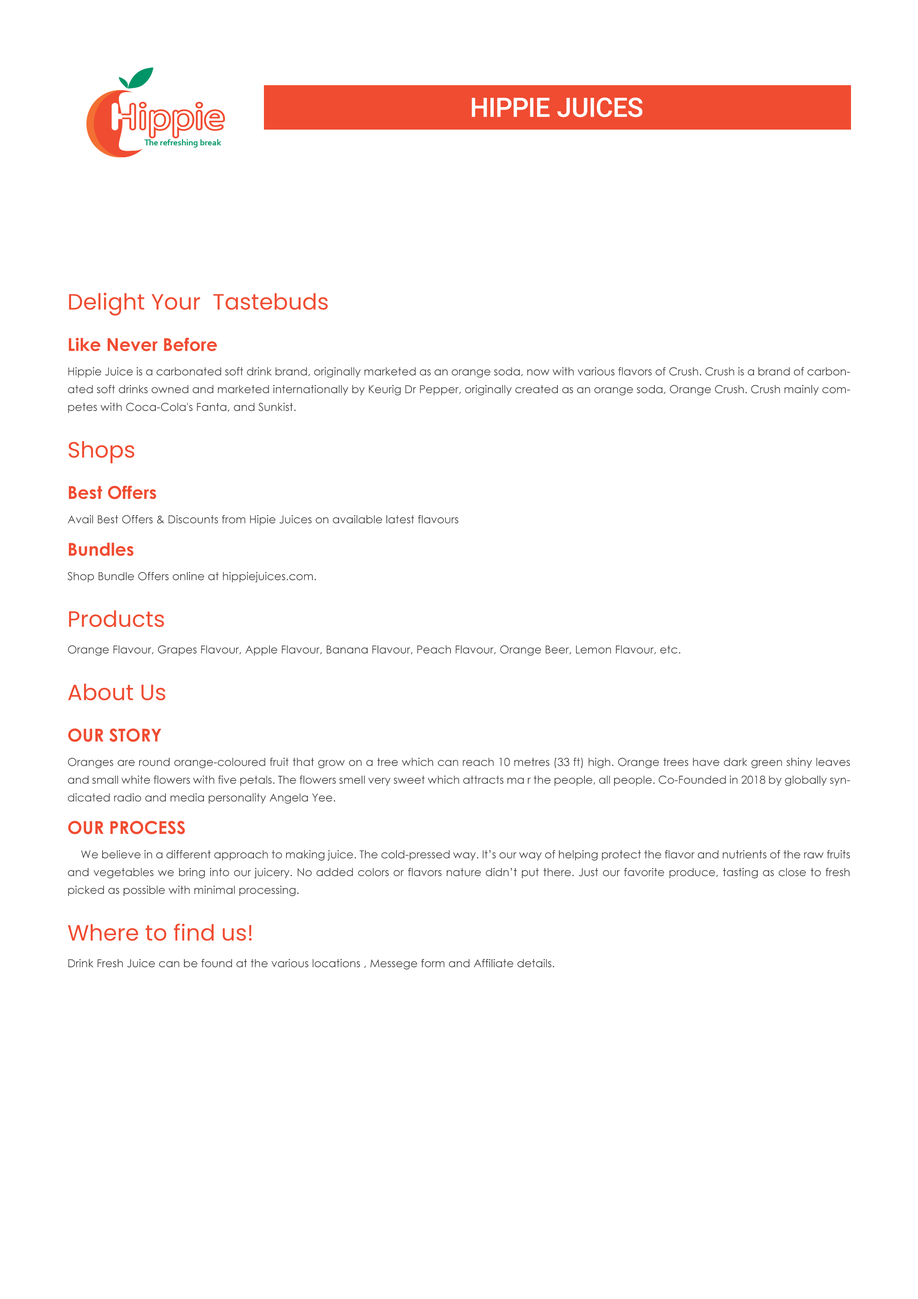
<style>
.page{position:relative;width:918px;height:1299px;background:#ffffff}
.page>*{position:absolute;margin:0}
.t1{font:26.7px "Roboto-Medium";color:#ffffff}
.t2{font:4.4px "MyriadPro-Regular"}
</style>
<div class="page">
<p class="t1" style="left:472px;top:97px;width:171px;height:20px">HIPPIE JUICES</p>
<p class="t2" style="left:67px;top:292px;width:783px;height:677px">Delight Your  Tastebuds <br>Like Never Before<br>Hippie Juice is a carbonated soft drink brand, originally marketed as an orange soda, now with various flavors of Crush. Crush is a brand of carbonated soft drinks owned and marketed internationally by Keurig Dr Pepper, originally created as an orange soda, Orange Crush. Crush mainly competes with Coca-Cola's Fanta, and Sunkist.<br>Shops<br>Best Offers<br>Avail Best Offers &amp; Discounts from Hipie Juices on available latest flavours<br>Bundles<br>Shop Bundle Offers online at hippiejuices.com. <br>Products<br>Orange Flavour, Grapes Flavour, Apple Flavour, Banana Flavour, Peach Flavour, Orange Beer, Lemon Flavour, etc.<br>About Us<br>OUR STORY<br>Oranges are round orange-coloured fruit that grow on a tree which can reach 10 metres (33 ft) high. Orange trees have dark green shiny leaves and small white flowers with five petals. The flowers smell very sweet which attracts ma r the people, all people. Co-Founded in 2018 by globally syndicated radio and media personality Angela Yee. <br>OUR PROCESS<br> We believe in a different approach to making juice. The cold-pressed way. It’s our way of helping protect the flavor and nutrients of the raw fruits and vegetables we bring into our juicery. No added colors or flavors nature didn’t put there. Just our favorite produce, tasting as close to fresh picked as possible with minimal processing. <br>Where to find us!<br>Drink Fresh Juice can be found at the various locations , Messege form and Affiliate details.</p>
</div>
